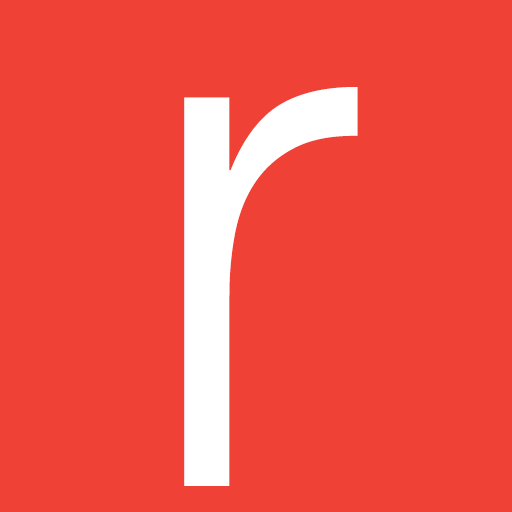
<style>
.page{position:relative;width:512px;height:512px;background:#ef4135}
.page>*{position:absolute;margin:0}
.t1{font:750px "Helvetica-Light";color:#ffffff}
</style>
<div class="page">
<p class="t1" style="left:184px;top:87px;width:174px;height:399px">r</p>
</div>
